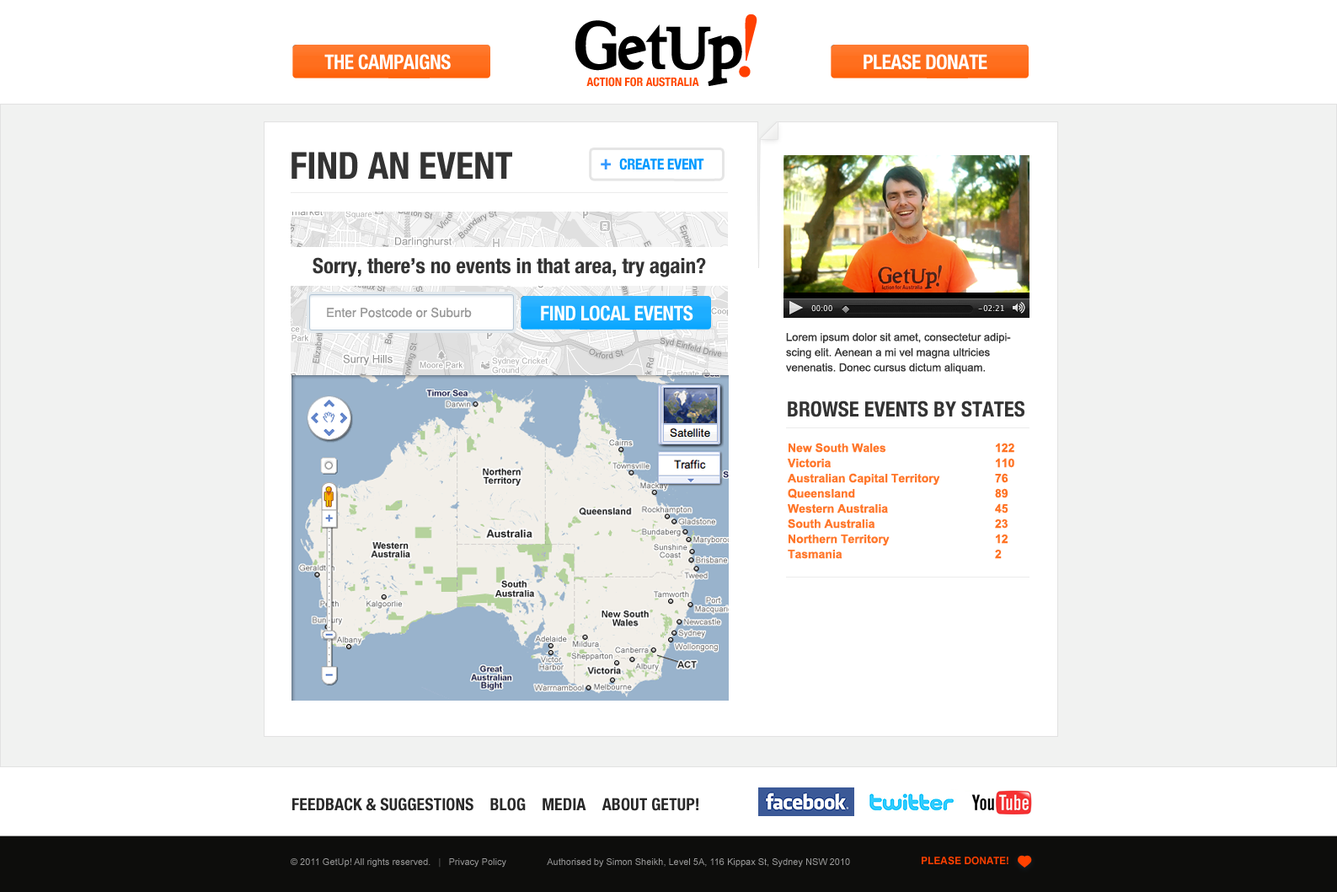
<style>
.page{position:relative;width:1337px;height:892px;background:#ffffff}
.page>*{position:absolute;margin:0}
.t1{font:20.2px "HelveticaNeue-CondensedBold";letter-spacing:-0.025em;color:#ffffff;text-transform:uppercase}
.t2{font:11.8px "HelveticaNeue-CondensedBold";color:#ff4800;text-transform:uppercase}
.t3{font:37.1px "HelveticaNeue-CondensedBold";color:#333333;text-transform:uppercase}
.t4{font:21.1px "HelveticaNeue-CondensedBold";color:#333333}
.t5{font:12.6px "Helvetica";color:#999999}
.t6{font:11px/15.2px "ArialMT";color:#333333}
.t7{font:21.1px "HelveticaNeue-CondensedBold";color:#333333;text-transform:uppercase}
.t8{font:11.8px/15.2px "Arial-BoldMT";color:#ff772b}
.t9{font:11.8px/15.2px "Arial-BoldMT";color:#ff7324}
.t10{font:16.9px "HelveticaNeue-CondensedBold";color:#292929;text-transform:uppercase}
.t11{font:9.3px "ArialMT";color:#999999}
.t12{font:9.3px "ArialMT";color:#666666}
.t13{font:10.1px "Arial-BoldMT";color:#ff4000;text-transform:uppercase}
</style>
<div class="page">
<p class="t1" style="left:324px;top:54px;width:127px;height:16px">The campaigns</p>
<p class="t1" style="left:864px;top:54px;width:124px;height:16px">Please Donate</p>
<p class="t2" style="left:587px;top:77px;width:112px;height:10px">Action for Australia</p>
<p class="t3" style="left:292px;top:152px;width:220px;height:27px">find an event</p>
<p class="t4" style="left:313px;top:257px;width:393px;height:20px">Sorry, there’s no events in that area, try again?</p>
<p class="t1" style="left:541px;top:305px;width:153px;height:16px">find local events</p>
<p class="t5" style="left:327px;top:307px;width:145px;height:11px">Enter Postcode or Suburb</p>
<p class="t6" style="left:786px;top:333px;width:225px;height:40px">Lorem ipsum dolor sit amet, consectetur adipiscing elit. Aenean a mi vel magna ultricies venenatis. Donec cursus dictum aliquam.</p>
<p class="t7" style="left:788px;top:400px;width:237px;height:17px">BROWSE EVENTS BY STATEs</p>
<p class="t8" style="left:787px;top:442px;width:153px;height:117px">New South Wales<br>Victoria<br>Australian Capital Territory<br>Queensland<br>Western Australia<br>South Australia<br>Northern Territory<br>Tasmania</p>
<p class="t9" style="left:995px;top:442px;width:20px;height:117px">122<br>110<br>76<br>89<br>45<br>23<br>12<br>2</p>
<p class="t10" style="left:292px;top:797px;width:407px;height:14px">feedback &amp; suggestions    blog    Media    about getup!</p>
<p class="t11" style="left:291px;top:858px;width:559px;height:9px">© 2011 GetUp! All rights reserved.  <span class="t12"> |   </span>Privacy Policy                Authorised by Simon Sheikh, Level 5A, 116 Kippax St, Sydney NSW 2010</p>
<p class="t13" style="left:922px;top:856px;width:87px;height:9px">please donate!</p>
</div>
